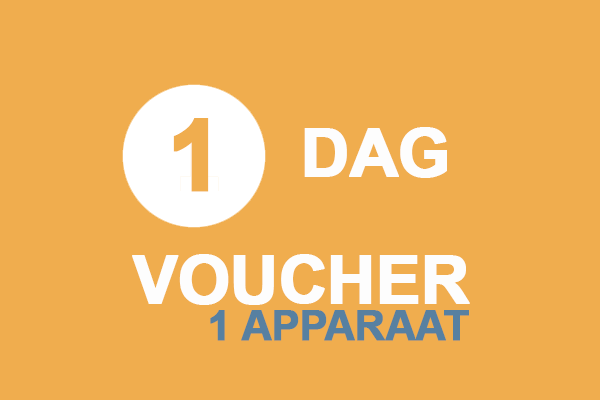
<style>
.page{position:relative;width:600px;height:400px;background:#f0ad4e}
.page>*{position:absolute;margin:0}
.t1{font:100px "Arial-BoldMT";letter-spacing:-0.02em;color:#f0ad4e;font-weight:bold}
.t2{font:66.7px "Arial-BoldMT";letter-spacing:-0.02em;color:#fdfdfd;font-weight:bold}
.t3{font:41.7px "Arial-BoldMT";letter-spacing:-0.02em;color:#5780a1;font-weight:bold}
</style>
<div class="page">
<p class="t1" style="left:173px;top:118px;width:36px;height:74px">1</p>
<p class="t2" style="left:304px;top:127px;width:143px;height:51px">DAG</p>
<p class="t2" style="left:132px;top:254px;width:338px;height:51px">VOUCHER</p>
<p class="t3" style="left:210px;top:310px;width:259px;height:31px">1 APPARAAT</p>
</div>
